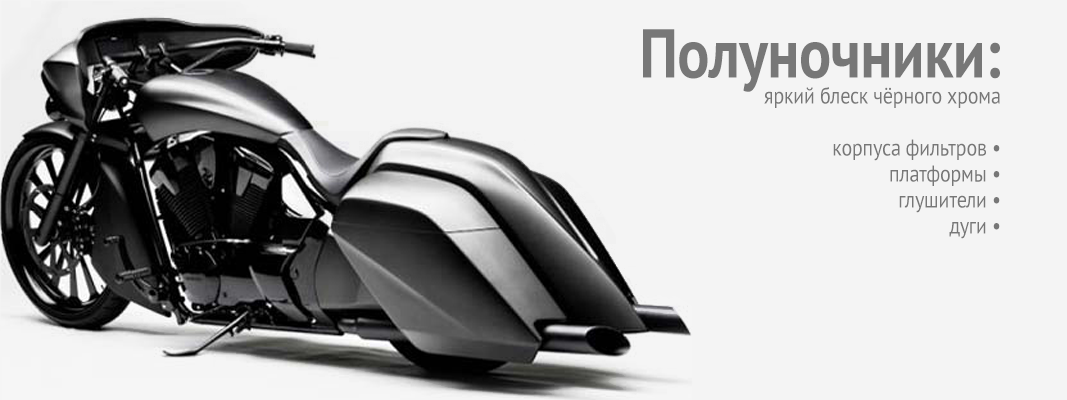
<style>
.page{position:relative;width:1067px;height:400px;background:#f4f4f4}
.page>*{position:absolute;margin:0}
.t1{font:23px/26px "PTSans-Regular";letter-spacing:-0.01em;color:#777777;scale:0.87 1}
.t2{font:69px/26px "PTSans-Bold";letter-spacing:-0.01em;color:#777777;scale:0.87 1}
</style>
<div class="page">
<p class="t1" style="left:643px;top:29px;width:357px;height:210px;text-align:right"><span class="t2">Полуночники:<br></span>яркий блеск чёрного хрома<br><br>корпуса фильтров •<br>платформы •<br>глушители •<br>дуги •</p>
</div>
